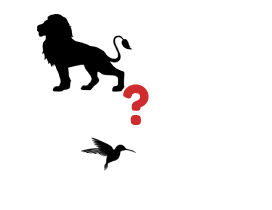
<style>
.page{position:relative;width:272px;height:210px;background:#ffffff}
.page>*{position:absolute;margin:0}
.t1{font:54px "FredokaOne-Regular";color:#cf2d2d}
</style>
<div class="page">
<p class="t1" style="left:123px;top:84px;width:26px;height:42px">?</p>
</div>
